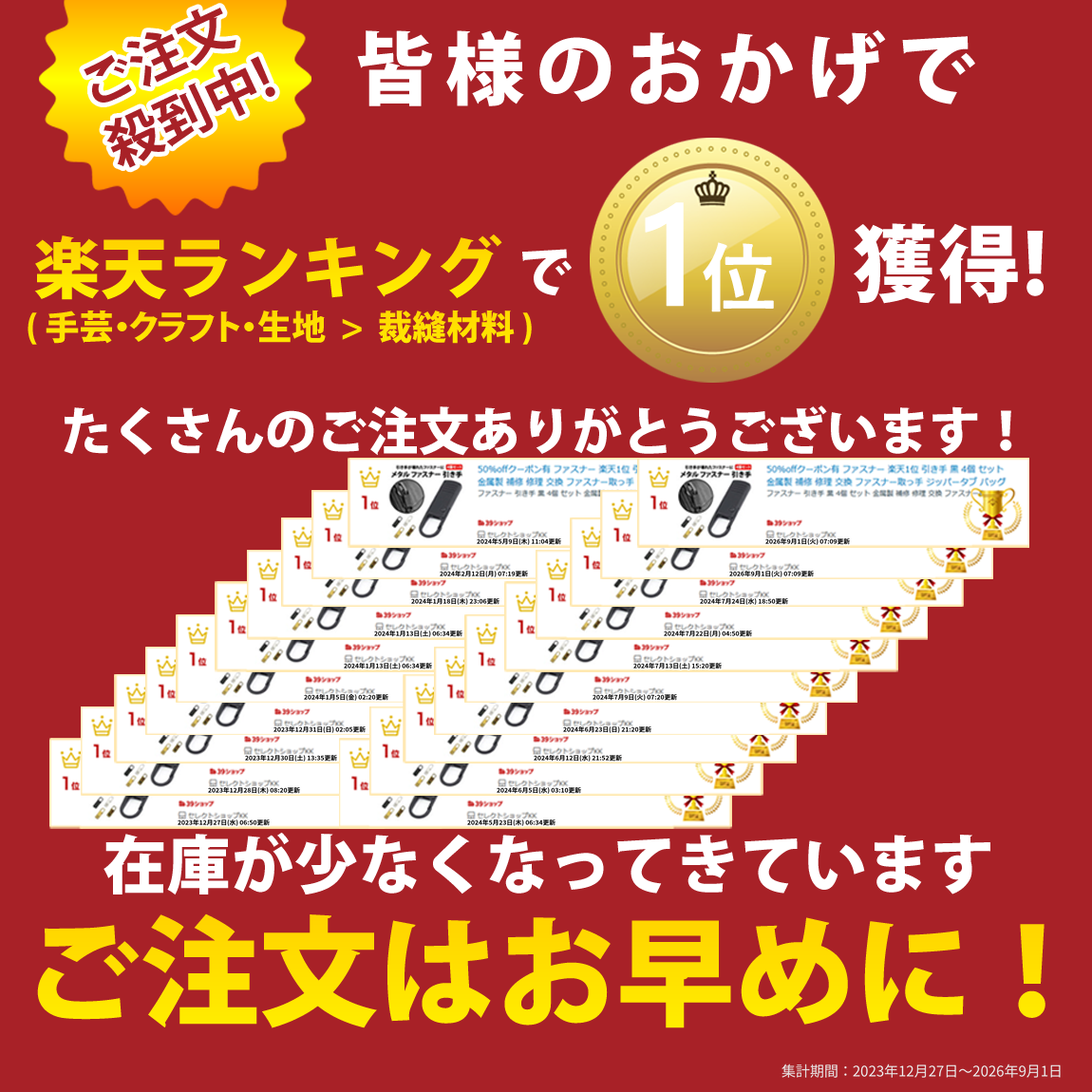
<style>
.page{position:relative;width:1092px;height:1092px;background:#a82127}
.page>*{position:absolute;margin:0}
.t1{font:54.1px "KozGoPr6N-Bold";color:#a82127}
.t2{font:79.1px "KozGoPr6N-Heavy";letter-spacing:0.14em;color:#ffffff}
.t3{font:143px "YuGothicUI-Semibold";color:#ffffff;font-weight:bold}
.t4{font:74.7px "YuGothicUI-Semibold";color:#ffffff;font-weight:bold}
.t5{font:66.9px "KozGoPr6N-Heavy";color:#ffdf00}
.t6{font:83.3px "KozGoPr6N-Heavy";letter-spacing:0.02em;color:#ffffff}
.t7{font:54px "KozGoPr6N-Heavy";color:#ffffff}
.t8{font:34.2px "KozGoPr6N-Heavy";color:#ffe000}
.t9{font:51.1px "KozGoPr6N-Heavy";color:#ffffff}
.t10{font:63.7px "KozGoPr6N-Heavy";color:#ffffff}
.t11{font:118.9px "KozGoPr6N-Heavy";color:#ffe100}
</style>
<div class="page">
<p class="t1" style="left:84px;top:8px;width:191px;height:160px;rotate:-25deg">ご注文<br>殺到中!</p>
<p class="t2" style="left:357px;top:29px;width:618px;height:77px">皆様のおかげで</p>
<p class="t3" style="left:645px;top:202px;width:129px;height:110px">1<span class="t4">位</span></p>
<p class="t5" style="left:34px;top:234px;width:468px;height:66px">楽天ランキング</p>
<p class="t6" style="left:854px;top:223px;width:190px;height:81px">獲得!</p>
<p class="t7" style="left:522px;top:249px;width:50px;height:47px">で</p>
<p class="t8" style="left:28px;top:310px;width:504px;height:35px">( 手芸・クラフト・生地  &gt;  裁縫材料 )</p>
<p class="t9" style="left:64px;top:405px;width:948px;height:51px">たくさんのご注文ありがとうございます！</p>
<p class="t10" style="left:104px;top:832px;width:886px;height:63px">在庫が少なくなってきています</p>
<p class="t11" style="left:37px;top:913px;width:1008px;height:115px">ご注文はお早めに！</p>
</div>
